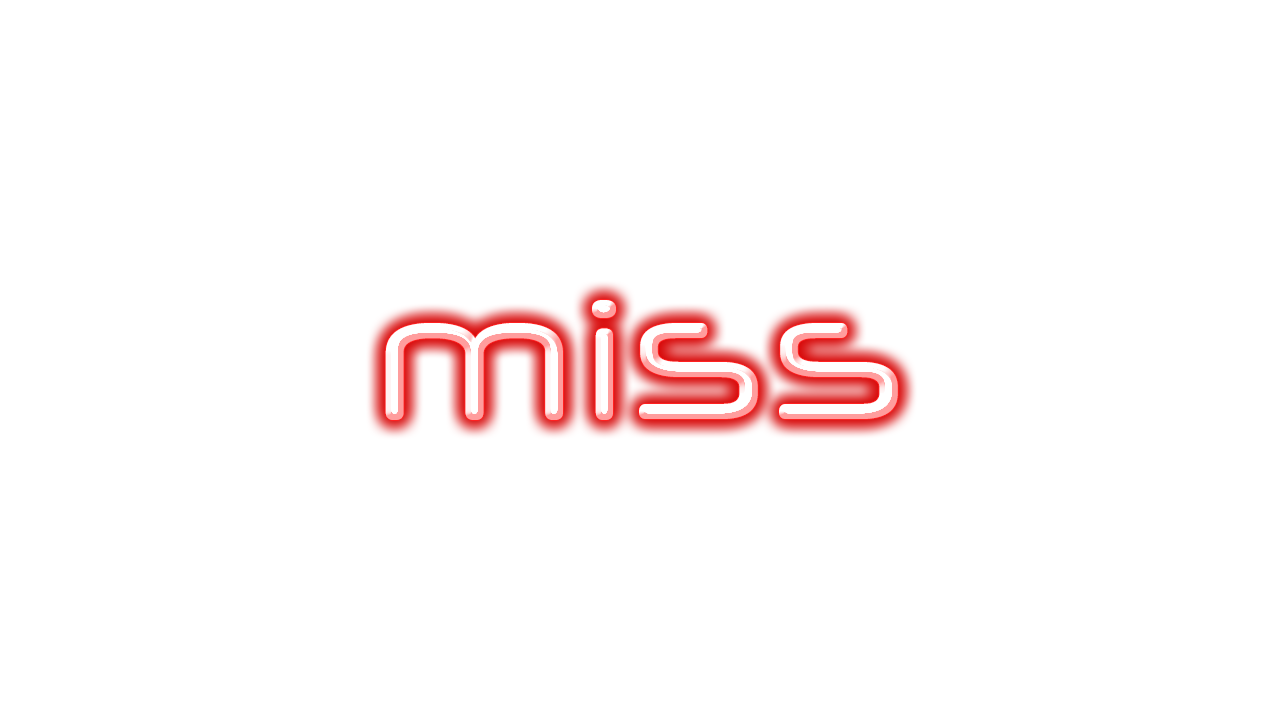
<style>
.page{position:relative;width:1280px;height:720px;background:#ffffff}
.page>*{position:absolute;margin:0}
.t1{font:180px "NeuropolXFree"}
</style>
<div class="page">
<p class="t1" style="left:385px;top:300px;width:513px;height:120px">miss</p>
</div>
